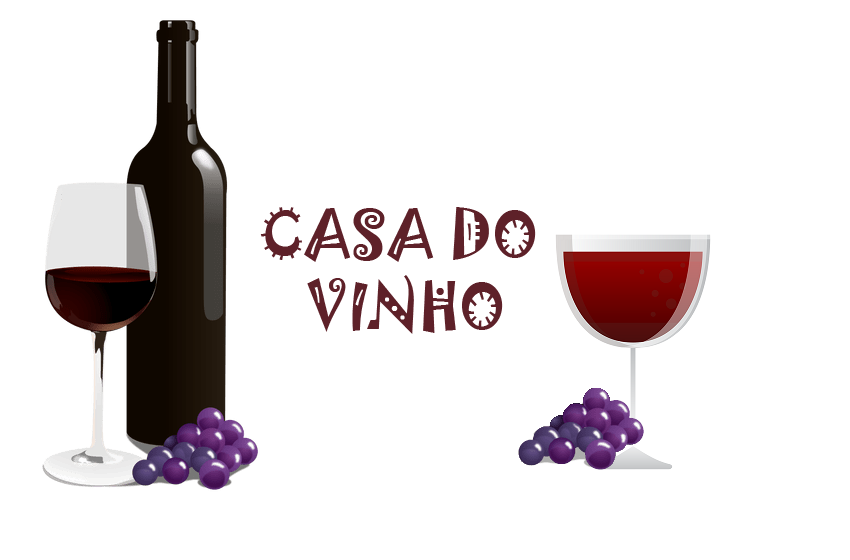
<style>
.page{position:relative;width:850px;height:560px;background:#ffffff}
.page>*{position:absolute;margin:0}
.t1{font:60px "Jokerman-Regular";color:#5e2129}
</style>
<div class="page">
<p class="t1" style="left:260px;top:207px;width:276px;height:127px;text-align:center">CASA DO <br>VINHO</p>
</div>
